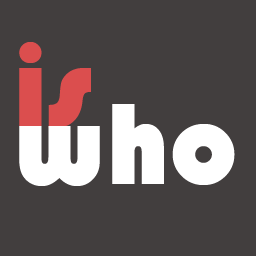
<style>
.page{position:relative;width:256px;height:256px;background:#423e3e}
.page>*{position:absolute;margin:0}
.t1{font:120px "Bauhaus93";color:#db4e4e}
.t2{font:120px "Bauhaus93";color:#ffffff}
</style>
<div class="page">
<p class="t1" style="left:19px;top:42px;width:72px;height:86px">is</p>
<p class="t2" style="left:19px;top:104px;width:216px;height:82px">who</p>
</div>
